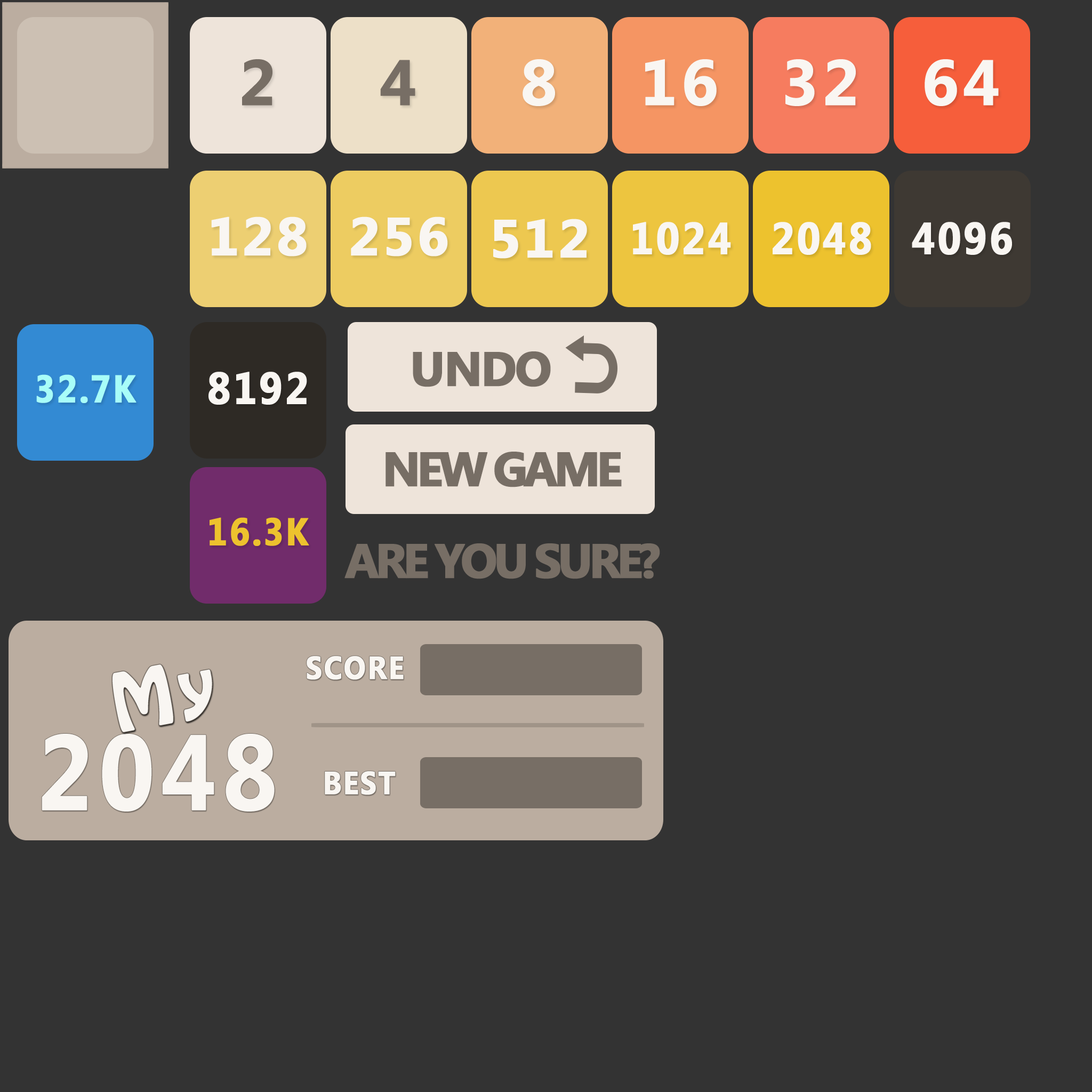
<style>
.page{position:relative;width:1092px;height:1092px;background:#333333}
.page>*{position:absolute;margin:0}
.t1{font:64px "MicrosoftNewTaiLue-Bold";letter-spacing:0.04em;color:#776e65;font-weight:bold}
.t2{font:64px "MicrosoftNewTaiLue-Bold";letter-spacing:0.04em;color:#f9f6f2;font-weight:bold}
.t3{font:53.3px "MicrosoftNewTaiLue-Bold";letter-spacing:0.04em;color:#f9f6f2;font-weight:bold}
.t4{font:44.8px "MicrosoftNewTaiLue-Bold";letter-spacing:0.04em;color:#f9f6f2;font-weight:bold;scale:0.9 1}
.t5{font:48px "MicrosoftNewTaiLue-Bold";letter-spacing:-0.05em;color:#776e65;font-weight:bold}
.t6{font:38.4px "MicrosoftNewTaiLue-Bold";letter-spacing:0.04em;color:#a8fdf8;font-weight:bold;scale:0.9 1}
.t7{font:48px "MicrosoftNewTaiLue-Bold";letter-spacing:-0.1em;color:#776e65;text-transform:uppercase;font-weight:bold}
.t8{font:38.4px "MicrosoftNewTaiLue-Bold";letter-spacing:0.04em;color:#edc22e;font-weight:bold;scale:0.9 1}
.t9{font:71.7px "HoboStd";letter-spacing:0.08em;color:#f9f6f2}
.t10{font:32px "MicrosoftNewTaiLue-Bold";letter-spacing:0.04em;color:#f9f6f2;text-transform:uppercase;font-weight:bold;scale:0.9 1}
.t11{font:106.6px "MicrosoftNewTaiLue-Bold";letter-spacing:0.04em;color:#f9f6f2;text-transform:uppercase;font-weight:bold;scale:0.9 1}
</style>
<div class="page">
<p class="t1" style="left:242px;top:59px;width:30px;height:47px">2</p>
<p class="t1" style="left:380px;top:60px;width:35px;height:46px">4</p>
<p class="t2" style="left:523px;top:59px;width:32px;height:47px">8</p>
<p class="t2" style="left:645px;top:59px;width:72px;height:47px">16</p>
<p class="t2" style="left:785px;top:59px;width:71px;height:47px">32</p>
<p class="t2" style="left:925px;top:59px;width:74px;height:47px">64</p>
<p class="t3" style="left:211px;top:216px;width:96px;height:40px">128</p>
<p class="t3" style="left:351px;top:216px;width:97px;height:40px">256</p>
<p class="t3" style="left:493px;top:219px;width:94px;height:40px">512</p>
<p class="t4" style="left:633px;top:222px;width:98px;height:33px">1024</p>
<p class="t4" style="left:773px;top:222px;width:98px;height:33px">2048</p>
<p class="t4" style="left:912px;top:222px;width:100px;height:33px">4096</p>
<p class="t5" style="left:413px;top:351px;width:138px;height:36px">UNDO</p>
<p class="t6" style="left:36px;top:374px;width:100px;height:29px">32.7K</p>
<p class="t4" style="left:208px;top:372px;width:99px;height:33px">8192</p>
<p class="t7" style="left:386px;top:452px;width:236px;height:35px">New Game</p>
<p class="t8" style="left:210px;top:517px;width:99px;height:29px">16.3K</p>
<p class="t7" style="left:344px;top:543px;width:316px;height:36px">Are you sure?</p>
<p class="t9" style="left:113px;top:664px;width:99px;height:68px;rotate:-11deg">My</p>
<p class="t9" style="left:113px;top:664px;width:99px;height:68px;rotate:-11deg">My</p>
<p class="t10" style="left:307px;top:656px;width:97px;height:24px">score</p>
<p class="t11" style="left:42px;top:734px;width:233px;height:78px">2048</p>
<p class="t10" style="left:325px;top:771px;width:71px;height:24px">BEST</p>
</div>
